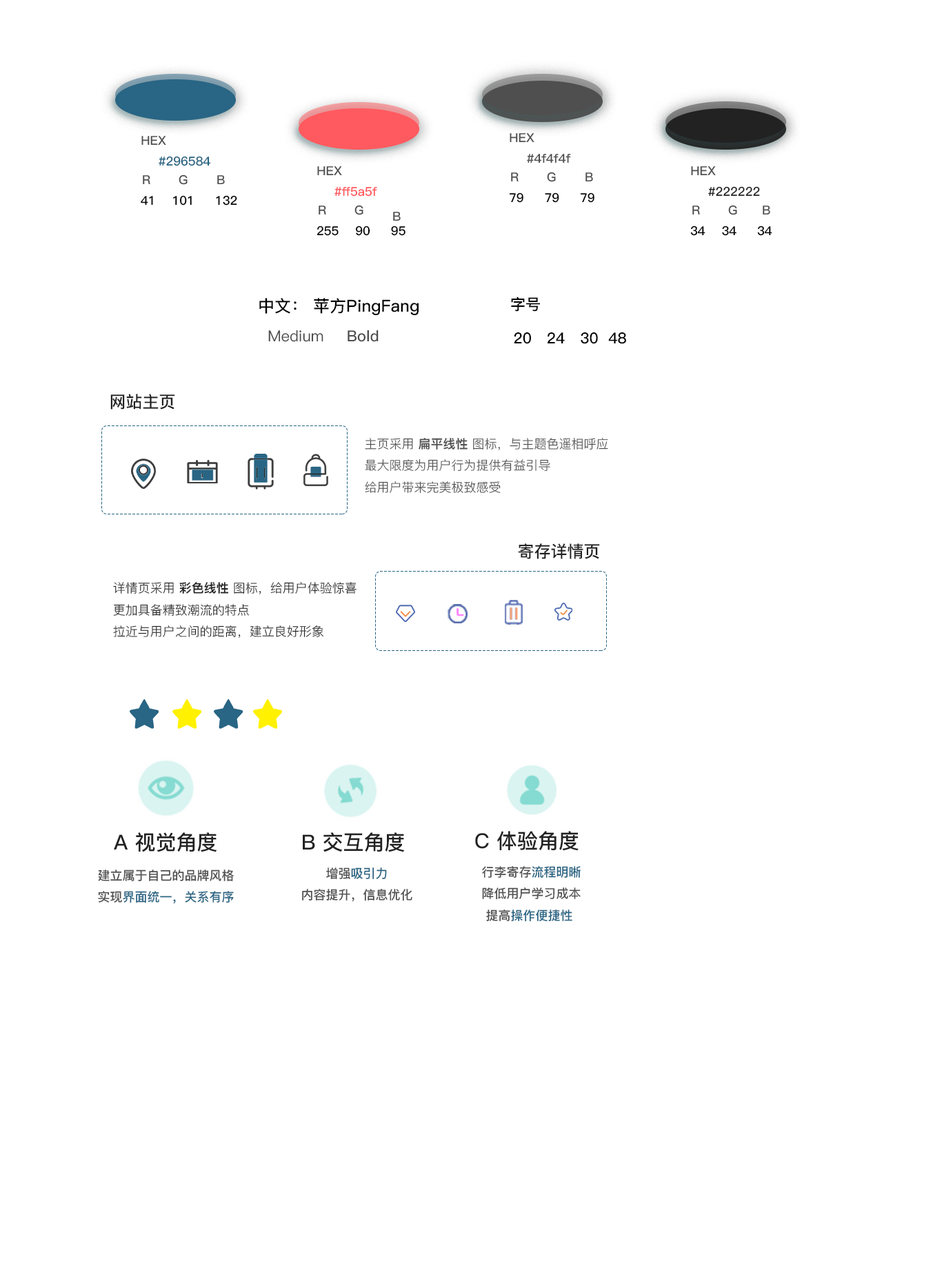
<style>
.page{position:relative;width:942px;height:1266px;background:#ffffff}
.page>*{position:absolute;margin:0}
.t1{font:12.4px "PingFang-SC-Bold";color:#4f4f4f}
.t2{font:12.4px "PingFang-SC-Bold";color:#296584}
.t3{font:12.4px "PingFang-SC-Bold";color:#000000}
.t4{font:12.4px "PingFang-SC-Bold";color:#ff5a5f}
.t5{font:12.4px "PingFang-SC-Bold";color:#222222}
.t6{font:16.5px "PingFang-SC-Bold";color:#000000}
.t7{font:15.2px "PingFang-SC-Bold";color:#000000}
.t8{font:15.2px "PingFang-SC-Medium";color:#4f4f4f}
.t9{font:15.2px "PingFang-SC-Bold";color:#4f4f4f}
.t10{font:16.5px "PingFang-SC-Bold";color:#ffffff}
.t11{font:16.5px "PingFang-SC-Bold";color:#222222}
.t12{font:12.4px "PingFang-SC-Regular";color:#4f4f4f}
.t13{font:12.4px "PingFang-SC-Heavy";color:#4f4f4f}
.t14{font:12.4px "PingFang-SC-Regular";color:#222222}
.t15{font:12.4px "PingFang-SC-Heavy";color:#222222}
.t16{font:20.7px "PingFang-SC-Bold";color:#222222}
</style>
<div class="page">
<p class="t1" style="left:141px;top:136px;width:25px;height:9px">HEX</p>
<p class="t1" style="left:510px;top:133px;width:24px;height:10px">HEX</p>
<p class="t2" style="left:159px;top:156px;width:52px;height:10px">#296584</p>
<p class="t1" style="left:527px;top:154px;width:44px;height:9px">#4f4f4f</p>
<p class="t1" style="left:317px;top:166px;width:25px;height:10px">HEX</p>
<p class="t1" style="left:511px;top:172px;width:8px;height:10px">R</p>
<p class="t1" style="left:547px;top:172px;width:9px;height:10px">G</p>
<p class="t1" style="left:585px;top:172px;width:8px;height:10px">B</p>
<p class="t1" style="left:691px;top:166px;width:25px;height:10px">HEX</p>
<p class="t1" style="left:143px;top:175px;width:7px;height:10px">R</p>
<p class="t1" style="left:179px;top:174px;width:9px;height:11px">G</p>
<p class="t1" style="left:217px;top:175px;width:8px;height:10px">B</p>
<p class="t3" style="left:141px;top:195px;width:96px;height:10px">41    101     132</p>
<p class="t4" style="left:334px;top:187px;width:43px;height:10px">#ff5a5f</p>
<p class="t3" style="left:509px;top:192px;width:85px;height:11px">79     79     79</p>
<p class="t5" style="left:708px;top:186px;width:52px;height:11px">#222222</p>
<p class="t1" style="left:319px;top:205px;width:7px;height:10px">R</p>
<p class="t1" style="left:354px;top:205px;width:9px;height:10px">G</p>
<p class="t1" style="left:692px;top:205px;width:8px;height:10px">R</p>
<p class="t1" style="left:728px;top:205px;width:9px;height:10px">G</p>
<p class="t1" style="left:763px;top:205px;width:7px;height:10px">B</p>
<p class="t1" style="left:393px;top:212px;width:8px;height:9px">B</p>
<p class="t3" style="left:316px;top:225px;width:89px;height:11px">255    90     95</p>
<p class="t3" style="left:690px;top:225px;width:82px;height:11px">34    34     34</p>
<p class="t6" style="left:259px;top:298px;width:160px;height:17px">中文： 苹方PingFang</p>
<p class="t7" style="left:511px;top:296px;width:29px;height:16px">字号</p>
<p class="t8" style="left:268px;top:330px;width:55px;height:12px">Medium</p>
<p class="t9" style="left:348px;top:330px;width:31px;height:12px">Bold</p>
<p class="t7" style="left:514px;top:332px;width:112px;height:12px">20   24   30  48</p>
<p class="t10" style="left:110px;top:394px;width:157px;height:17px"><span class="t11">网站主页</span>orem Ipsum</p>
<p class="t12" style="left:365px;top:438px;width:243px;height:55px">主页采用 <span class="t13">扁平线性</span> 图标，与主题色遥相呼应<br>最大限度为用户行为提供有益引导<br>给用户带来完美极致感受</p>
<p class="t11" style="left:518px;top:543px;width:82px;height:16px">寄存详情页</p>
<p class="t14" style="left:113px;top:582px;width:243px;height:56px">详情页采用 <span class="t15">彩色线性</span> 图标，给用户体验惊喜<br>更加具备精致潮流的特点<br>拉近与用户之间的距离，建立良好形象</p>
<p class="t16" style="left:114px;top:832px;width:103px;height:20px">A 视觉角度</p>
<p class="t16" style="left:303px;top:832px;width:102px;height:20px">B 交互角度</p>
<p class="t16" style="left:475px;top:831px;width:104px;height:20px">C 体验角度</p>
<p class="t1" style="left:98px;top:870px;width:136px;height:34px">建立属于自己的品牌风格<br>实现<span class="t2">界面统一，关系有序</span></p>
<p class="t1" style="left:302px;top:867px;width:110px;height:35px">增强<span class="t2">吸引力<br></span>内容提升，信息优化</p>
<p class="t1" style="left:482px;top:866px;width:99px;height:56px">行李寄存<span class="t2">流程明晰<br></span>降低用户学习成本<br> 提高<span class="t2">操作便捷性</span></p>
</div>
